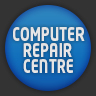
<style>
.page{position:relative;width:96px;height:96px;background:#333333}
.page>*{position:absolute;margin:0}
.t1{font:18.9px "NeoTech-Bold";color:#e5e5e5;scale:0.72 1}
</style>
<div class="page">
<p class="t1" style="left:13px;top:27px;width:72px;height:14px">COMPUTER</p>
<p class="t1" style="left:23px;top:43px;width:49px;height:14px">REPAIR</p>
<p class="t1" style="left:23px;top:59px;width:50px;height:14px">CENTRE</p>
</div>
